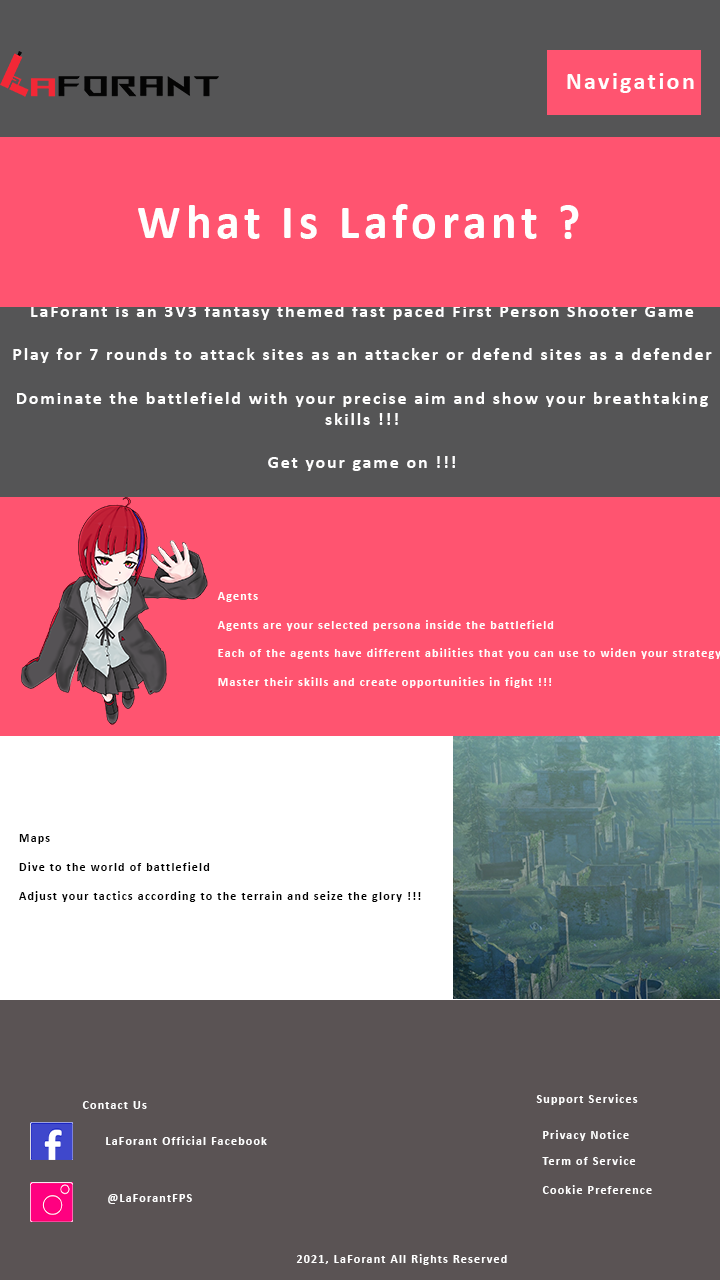
<style>
.page{position:relative;width:720px;height:1280px;background:#ff5470}
.page>*{position:absolute;margin:0}
.t1{font:24px "Calibri-Bold";letter-spacing:0.1em;color:#fefefe}
.t2{font:48px "Calibri-Bold";letter-spacing:0.1em;color:#fefefe}
.t3{font:18px "Calibri-Bold";letter-spacing:0.1em;color:#fefefe}
.t4{font:12px "Calibri-Bold";letter-spacing:0.1em;color:#fefefe}
.t5{font:12px "Calibri-Bold";letter-spacing:0.1em;color:#000000}
.t6{font:12px "Calibri-Bold";letter-spacing:0.1em;color:#ffffff}
</style>
<div class="page">
<p class="t1" style="left:567px;top:73px;width:127px;height:20px">Navigation</p>
<p class="t2" style="left:138px;top:204px;width:441px;height:35px">What Is Laforant ?</p>
<p class="t3" style="left:13px;top:305px;width:699px;height:166px;text-align:center">LaForant is an 3V3 fantasy themed fast paced First Person Shooter Game<br><br>Play for 7 rounds to attack sites as an attacker or defend sites as a defender<br><br>Dominate the battlefield with your precise aim and show your breathtaking skills !!!<br><br>Get your game on !!!</p>
<p class="t4" style="left:217px;top:592px;width:504px;height:96px">Agents<br><br>Agents are your selected persona inside the battlefield<br><br>Each of the agents have different abilities that you can use to widen your strategy<br><br>Master their skills and create opportunities in fight !!!</p>
<p class="t5" style="left:19px;top:834px;width:402px;height:68px">Maps<br><br>Dive to the world of battlefield<br><br>Adjust your tactics according to the terrain and seize the glory !!!</p>
<p class="t6" style="left:536px;top:1094px;width:102px;height:11px">Support Services</p>
<p class="t6" style="left:82px;top:1101px;width:65px;height:8px">Contact Us</p>
<p class="t6" style="left:543px;top:1130px;width:86px;height:11px">Privacy Notice</p>
<p class="t6" style="left:106px;top:1136px;width:161px;height:9px">LaForant Official Facebook</p>
<p class="t6" style="left:542px;top:1156px;width:94px;height:9px">Term of Service</p>
<p class="t6" style="left:542px;top:1185px;width:110px;height:9px">Cookie Preference</p>
<p class="t6" style="left:108px;top:1194px;width:84px;height:10px">@LaForantFPS</p>
<p class="t6" style="left:296px;top:1254px;width:211px;height:11px">2021, LaForant All Rights Reserved</p>
</div>
